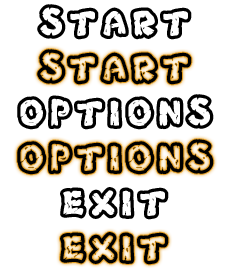
<style>
.page{position:relative;width:230px;height:270px;background:#ffffff}
.page>*{position:absolute;margin:0}
.t1{font:41.7px "Chlorinar-Regular";letter-spacing:0.15em;color:#000000}
</style>
<div class="page">
<p class="t1" style="left:37px;top:4px;width:155px;height:36px">START</p>
<p class="t1" style="left:37px;top:49px;width:155px;height:36px">START</p>
<p class="t1" style="left:17px;top:94px;width:197px;height:36px">OPTIONS</p>
<p class="t1" style="left:17px;top:139px;width:197px;height:36px">OPTIONS</p>
<p class="t1" style="left:60px;top:187px;width:109px;height:33px">EXIT</p>
<p class="t1" style="left:60px;top:232px;width:109px;height:33px">EXIT</p>
</div>
